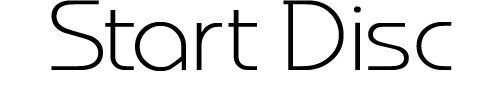
<style>
.page{position:relative;width:500px;height:96px;background:#ffffff}
.page>*{position:absolute;margin:0}
.t1{font:100px "MonaKo";color:#000000;scale:1.1 1}
</style>
<div class="page">
<p class="t1" style="left:51px;top:0px;width:401px;height:71px">Start Disc</p>
</div>
